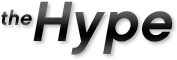
<style>
.page{position:relative;width:177px;height:60px;background:#ffffff}
.page>*{position:absolute;margin:0}
.t1{font:56.5px "Chalet-NewYorkNineteenSixty";letter-spacing:0.025em;font-style:italic}
.t2{font:20.6px "Chalet-NewYorkNineteenSixty";letter-spacing:0.025em;font-style:italic}
</style>
<div class="page">
<p class="t1" style="left:33px;top:1px;width:140px;height:54px">Hype</p>
<p class="t2" style="left:1px;top:9px;width:31px;height:17px">the</p>
</div>
